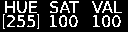
<style>
.page{position:relative;width:128px;height:32px;background:#000000}
.page>*{position:absolute;margin:0}
.t1{font:16px "DejaVuSans";color:#ffffff}
</style>
<div class="page">
<p class="t1" style="left:5px;top:1px;width:32px;height:13px">HUE</p>
<p class="t1" style="left:50px;top:1px;width:29px;height:13px">SAT</p>
<p class="t1" style="left:92px;top:1px;width:30px;height:12px">VAL</p>
<p class="t1" style="left:7px;top:15px;width:28px;height:12px">255</p>
<p class="t1" style="left:49px;top:15px;width:29px;height:13px">100</p>
<p class="t1" style="left:92px;top:15px;width:29px;height:13px">100</p>
</div>
